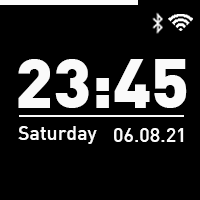
<style>
.page{position:relative;width:200px;height:200px;background:#000000}
.page>*{position:absolute;margin:0}
.t1{font:68.5px "DIN-Black";color:#fafafa}
.t2{font:19.6px "DIN-Medium";color:#fafafa}
</style>
<div class="page">
<p class="t1" style="left:18px;top:59px;width:169px;height:49px">23:45</p>
<p class="t2" style="left:18px;top:126px;width:79px;height:18px">Saturday</p>
<p class="t2" style="left:114px;top:128px;width:70px;height:14px">06.08.21</p>
</div>
